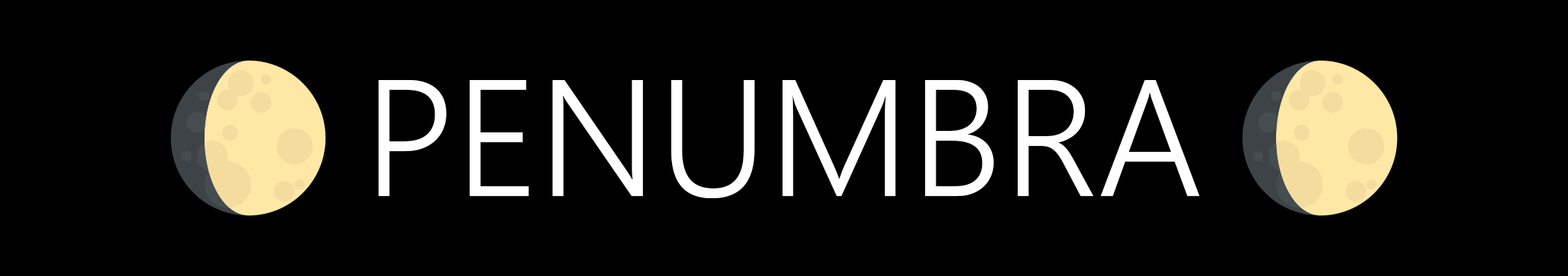
<style>
.page{position:relative;width:1568px;height:276px;background:#000000}
.page>*{position:absolute;margin:0}
.t1{font:164.9px "SegoeUI-Semilight"}
.t2{font:164.9px "EmojiOneColor"}
</style>
<div class="page">
<p class="t1" style="left:170px;top:60px;width:1228px;height:156px"><span class="t2">🌔 </span>PENUMBRA <span class="t2">🌔</span></p>
</div>
